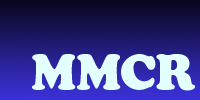
<style>
.page{position:relative;width:200px;height:100px}
.page>*{position:absolute;margin:0}
.t1{font:48px "CooperBlackStd";color:#e3ffff}
</style>
<div class="page">
<p class="t1" style="left:32px;top:54px;width:163px;height:37px">MMCR</p>
</div>
